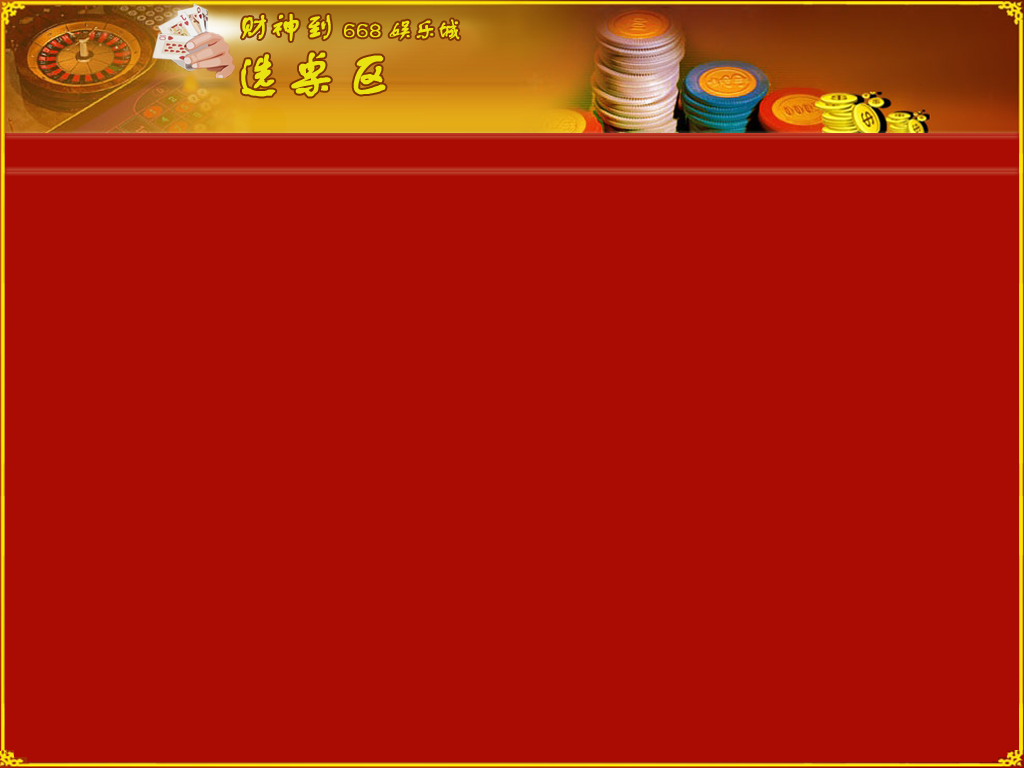
<style>
.page{position:relative;width:1024px;height:768px;background:#aa0c03}
.page>*{position:absolute;margin:0}
.t1{font:24px "FZSTK--GBK1-0";color:#e9e311;font-weight:bold}
.t2{font:32px "FZSTK--GBK1-0";color:#e9e311;font-weight:bold}
.t3{font:54px "FZSTK--GBK1-0";color:#e9e311;font-weight:bold}
</style>
<div class="page">
<p class="t1" style="left:242px;top:14px;width:218px;height:27px"><span class="t2">财神到 </span>668 娱乐城</p>
<p class="t3" style="left:241px;top:52px;width:145px;height:45px">选桌区</p>
</div>
